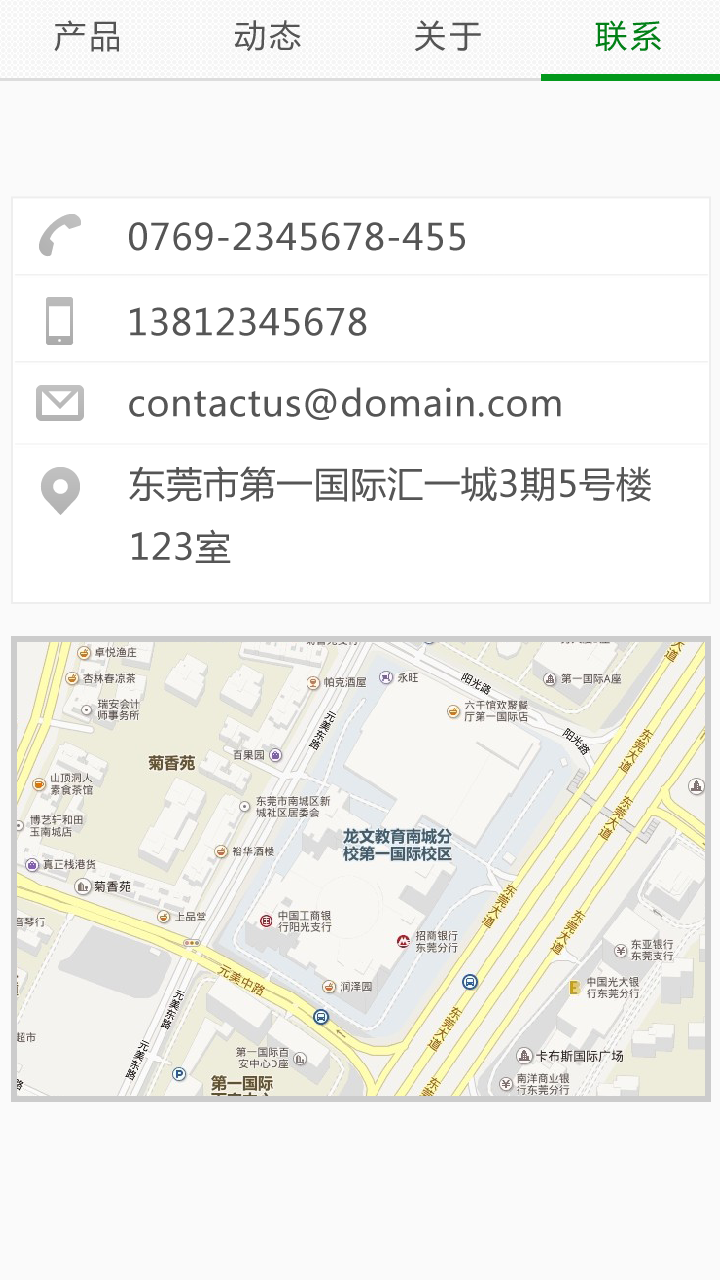
<style>
.page{position:relative;width:720px;height:1280px;background:#fafafa}
.page>*{position:absolute;margin:0}
.t1{font:32px "MicrosoftYaHei";letter-spacing:0.1em;color:#555555}
.t2{font:32px "MicrosoftYaHei";letter-spacing:0.1em;color:#028017}
.t3{font:36px "MicrosoftYaHei";letter-spacing:0.025em;color:#555555}
</style>
<div class="page">
<p class="t1" style="left:54px;top:20px;width:65px;height:32px">产品</p>
<p class="t1" style="left:234px;top:20px;width:67px;height:32px">动态</p>
<p class="t1" style="left:414px;top:20px;width:67px;height:32px">关于</p>
<p class="t2" style="left:595px;top:20px;width:66px;height:31px">联系</p>
<p class="t3" style="left:129px;top:222px;width:336px;height:29px">0769-2345678-455</p>
<p class="t3" style="left:130px;top:307px;width:237px;height:29px">13812345678</p>
<p class="t3" style="left:129px;top:387px;width:432px;height:33px">contactus@domain.com</p>
<p class="t3" style="left:129px;top:466px;width:522px;height:97px">东莞市第一国际汇一城3期5号楼<br>123室</p>
</div>
